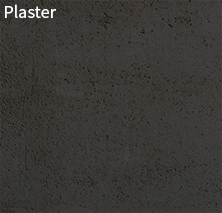
<style>
.page{position:relative;width:222px;height:213px}
.page>*{position:absolute;margin:0}
.t1{font:16px "NotoSansCJKkr-Regular";color:#ffffff}
</style>
<div class="page">
<p class="t1" style="left:5px;top:4px;width:51px;height:14px">Plaster</p>
</div>
